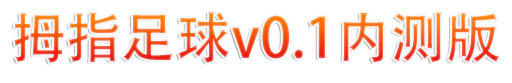
<style>
.page{position:relative;width:512px;height:83px;background:#ffffff}
.page>*{position:absolute;margin:0}
.t1{font:55px "AdobeHeitiStd-Regular"}
</style>
<div class="page">
<p class="t1" style="left:14px;top:12px;width:485px;height:51px">拇指足球v0.1内测版</p>
</div>
